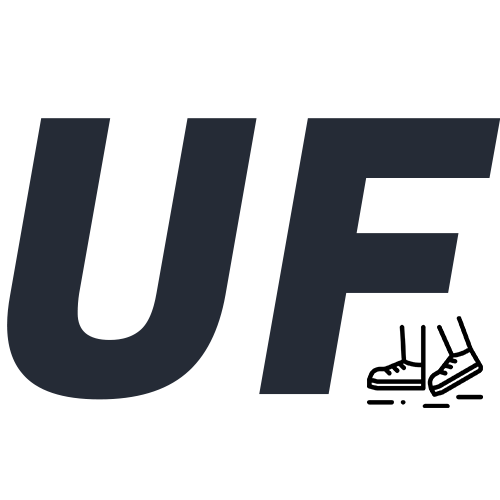
<style>
.page{position:relative;width:500px;height:500px;background:#ffffff}
.page>*{position:absolute;margin:0}
.t1{font:382.5px "FugazOne-Regular";color:#252b36}
</style>
<div class="page">
<p class="t1" style="left:7px;top:118px;width:494px;height:282px">UF</p>
</div>
